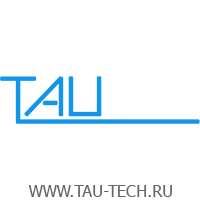
<style>
.page{position:relative;width:200px;height:200px;background:#ffffff}
.page>*{position:absolute;margin:0}
.t1{font:16px "Tahoma";color:#666666;text-transform:uppercase}
</style>
<div class="page">
<p class="t1" style="left:28px;top:185px;width:144px;height:12px">www.TAU-TECH.ru</p>
</div>
